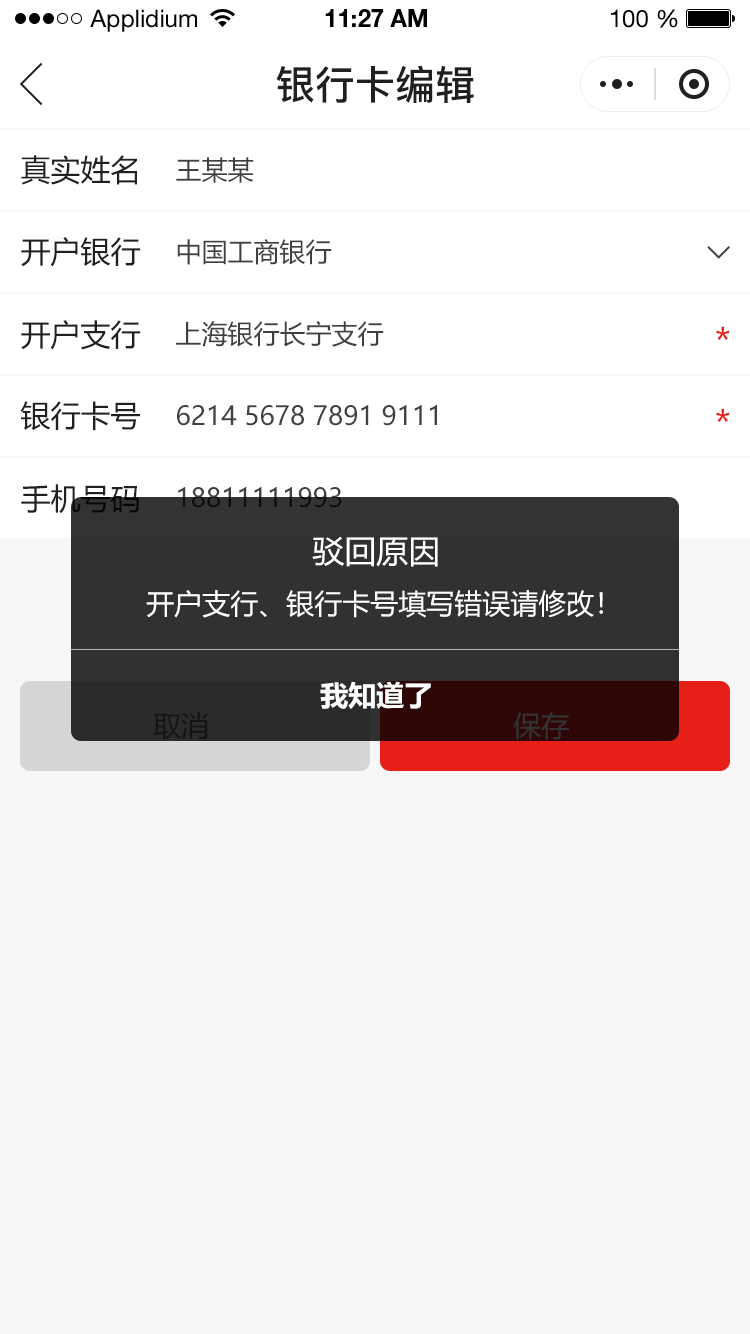
<style>
.page{position:relative;width:750px;height:1334px;background:#f7f7f7}
.page>*{position:absolute;margin:0}
.t1{font:24px "HelveticaNeueLTStd-Roman";color:#000000}
.t2{font:24px "HelveticaNeueLTStd-Bd";color:#000000}
.t3{font:40px "PingFang-SC-Bold";color:#202020;text-transform:uppercase}
.t4{font:30px "MicrosoftYaHei";color:#202020;text-transform:uppercase}
.t5{font:26px "MicrosoftYaHei";color:#404040;text-transform:uppercase}
.t6{font:36px "MicrosoftYaHei";color:#e61f18;text-transform:uppercase}
.t7{font:26px "MicrosoftYaHei";text-transform:uppercase}
.t8{font:32px "MicrosoftYaHei";color:#ffffff;text-transform:uppercase}
.t9{font:28px "MicrosoftYaHei";color:#ffffff;text-transform:uppercase}
.t10{font:28px "MicrosoftYaHei-Bold";color:#ffffff;text-transform:uppercase}
.t11{font:28px "MicrosoftYaHei";color:#141414;text-transform:uppercase}
.t12{font:28px "MicrosoftYaHei";color:#333333;text-transform:uppercase}
</style>
<div class="page">
<p class="t1" style="left:90px;top:9px;width:107px;height:23px">Applidium</p>
<p class="t2" style="left:325px;top:9px;width:102px;height:18px">11:27 AM</p>
<p class="t1" style="left:611px;top:9px;width:67px;height:19px">100 %</p>
<p class="t3" style="left:276px;top:65px;width:198px;height:38px">银行卡编辑</p>
<p class="t4" style="left:21px;top:155px;width:116px;height:30px">真实姓名</p>
<p class="t5" style="left:176px;top:157px;width:78px;height:26px">王某某</p>
<p class="t4" style="left:21px;top:237px;width:120px;height:30px">开户银行</p>
<p class="t5" style="left:177px;top:239px;width:155px;height:26px">中国工商银行</p>
<p class="t4" style="left:21px;top:320px;width:120px;height:30px">开户支行</p>
<p class="t5" style="left:176px;top:321px;width:208px;height:26px">上海银行长宁支行</p>
<p class="t6" style="left:716px;top:326px;width:14px;height:14px">*</p>
<p class="t4" style="left:20px;top:401px;width:120px;height:30px">银行卡号</p>
<p class="t5" style="left:177px;top:405px;width:260px;height:21px">6214 5678 7891 9111</p>
<p class="t6" style="left:716px;top:408px;width:14px;height:14px">*</p>
<p class="t4" style="left:21px;top:484px;width:118px;height:30px">手机号码</p>
<p class="t7" style="left:178px;top:487px;width:164px;height:21px">18811111993</p>
<p class="t8" style="left:312px;top:536px;width:126px;height:31px">驳回原因</p>
<p class="t9" style="left:146px;top:590px;width:457px;height:28px">开户支行、银行卡号填写错误请修改！</p>
<p class="t10" style="left:320px;top:681px;width:111px;height:28px">我知道了</p>
<p class="t11" style="left:153px;top:712px;width:55px;height:28px">取消</p>
<p class="t12" style="left:513px;top:712px;width:56px;height:28px">保存</p>
</div>
